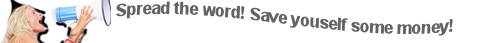
<style>
.page{position:relative;width:500px;height:43px;background:#ffffff}
.page>*{position:absolute;margin:0}
.t1{font:16.7px "Arial-BoldMT";letter-spacing:-0.025em;color:#636363}
</style>
<div class="page">
<p class="t1" style="left:116px;top:1px;width:337px;height:35px;rotate:2deg">Spread the word! Save youself some money!</p>
</div>
